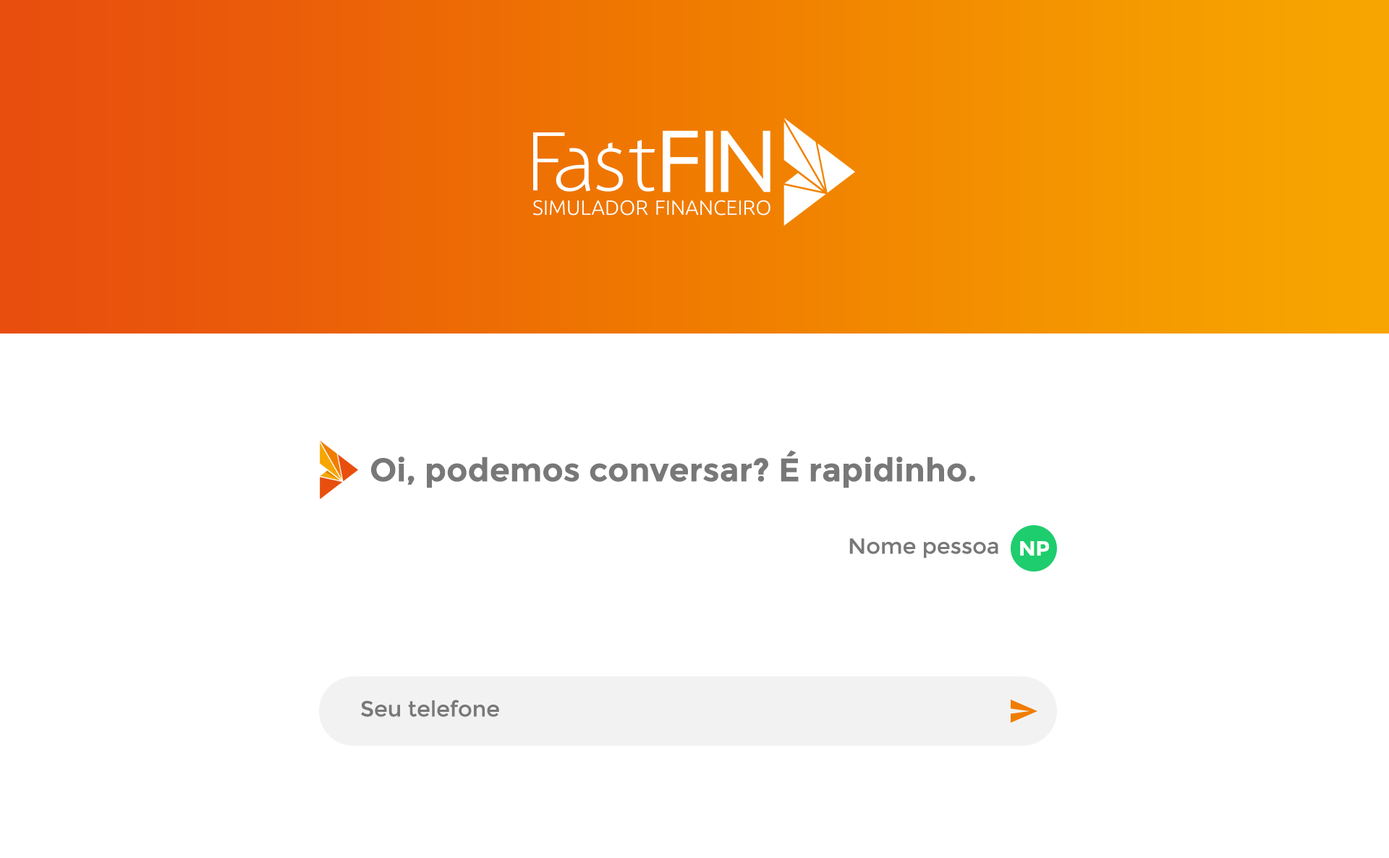
<style>
.page{position:relative;width:1389px;height:858px;background:#ffffff}
.page>*{position:absolute;margin:0}
.t1{font:32.6px "Montserrat-Bold";color:#797878}
.t2{font:21.7px "Montserrat-Regular";color:#797878}
.t3{font:20.4px "Montserrat-Bold";color:#ffffff}
</style>
<div class="page">
<p class="t1" style="left:371px;top:450px;width:604px;height:38px">Oi, podemos conversar? É rapidinho.</p>
<p class="t2" style="left:850px;top:538px;width:149px;height:21px">Nome pessoa</p>
<p class="t3" style="left:1020px;top:541px;width:29px;height:15px">NP</p>
<p class="t2" style="left:361px;top:700px;width:138px;height:17px">Seu telefone</p>
</div>
